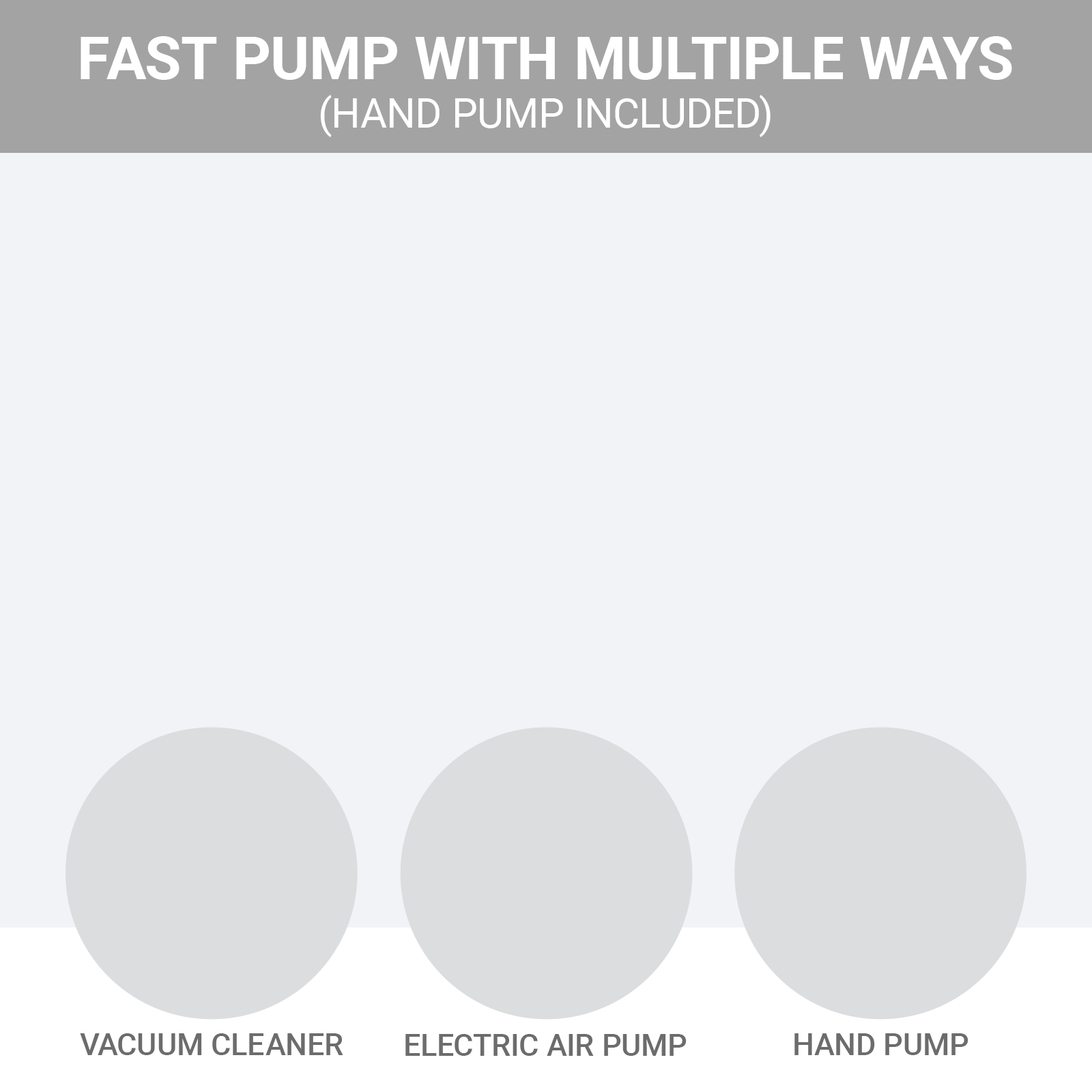
<style>
.page{position:relative;width:1092px;height:1092px;background:#f2f3f6}
.page>*{position:absolute;margin:0}
.t1{font:59.7px "Roboto-Bold";color:#ffffff}
.t2{font:40.8px "Roboto-Regular";color:#ffffff}
.t3{font:30.6px "Roboto-Medium";color:#6c6c6c}
</style>
<div class="page">
<p class="t1" style="left:81px;top:36px;width:931px;height:44px">FAST PUMP WITH MULTIPLE WAYS</p>
<p class="t2" style="left:320px;top:95px;width:451px;height:42px">(HAND PUMP INCLUDED)</p>
<p class="t3" style="left:80px;top:1033px;width:263px;height:22px">VACUUM CLEANER</p>
<p class="t3" style="left:405px;top:1034px;width:282px;height:22px">ELECTRIC AIR PUMP</p>
<p class="t3" style="left:794px;top:1033px;width:174px;height:22px">HAND PUMP</p>
</div>
